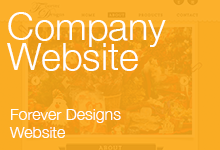
<style>
.page{position:relative;width:220px;height:150px}
.page>*{position:absolute;margin:0}
.t1{font:38px/30px "HelveticaNeue-Light";color:#ffffff}
.t2{font:16px/18px "HelveticaNeue-Light";color:#ffffff}
</style>
<div class="page">
<p class="t1" style="left:7px;top:12px;width:159px;height:59px">Company<br>Website</p>
<p class="t2" style="left:9px;top:109px;width:112px;height:29px">Forever Designs<br>Website</p>
</div>
